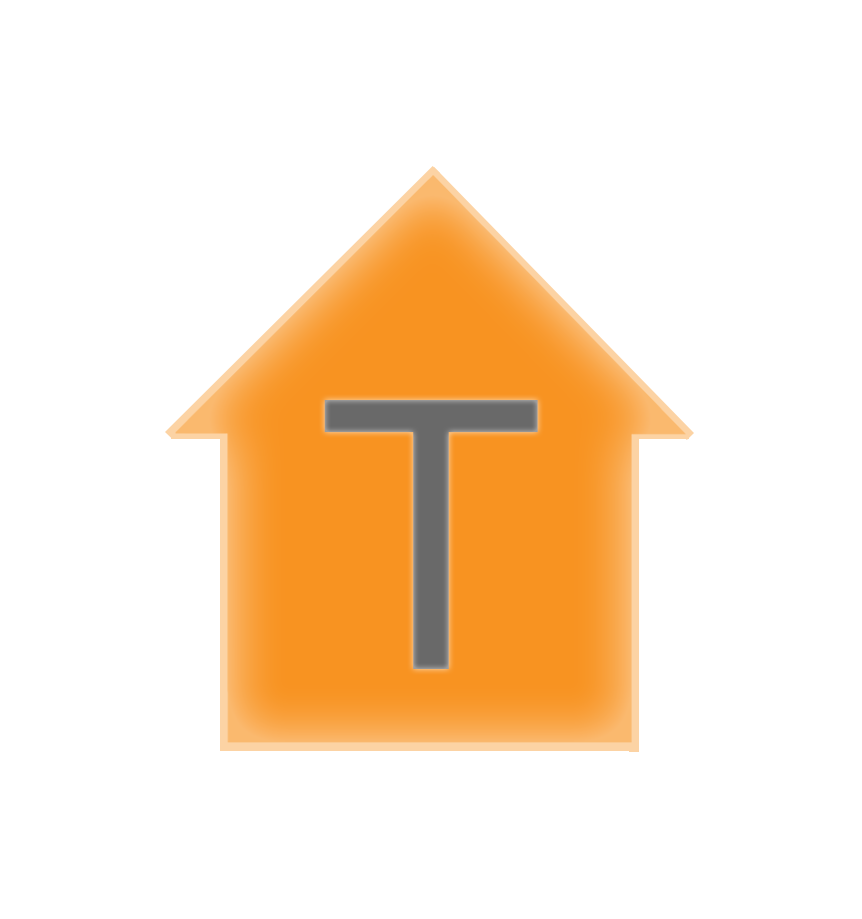
<style>
.page{position:relative;width:862px;height:919px;background:#ffffff}
.page>*{position:absolute;margin:0}
.t1{font:374.6px "ArialMT";letter-spacing:0.06em;color:#696969}
</style>
<div class="page">
<p class="t1" style="left:324px;top:400px;width:214px;height:269px">T</p>
</div>
